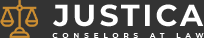
<style>
.page{position:relative;width:204px;height:38px;background:#333333}
.page>*{position:absolute;margin:0}
.t1{font:30px "Montserrat-Bold";letter-spacing:0.1em;color:#ffffff}
.t2{font:7px "Montserrat-SemiBold";letter-spacing:0.72em;color:#ffffff}
</style>
<div class="page">
<p class="t1" style="left:53px;top:4px;width:151px;height:23px">JUSTICA</p>
<p class="t2" style="left:52px;top:33px;width:152px;height:5px">CONSELORS AT LAW</p>
</div>
